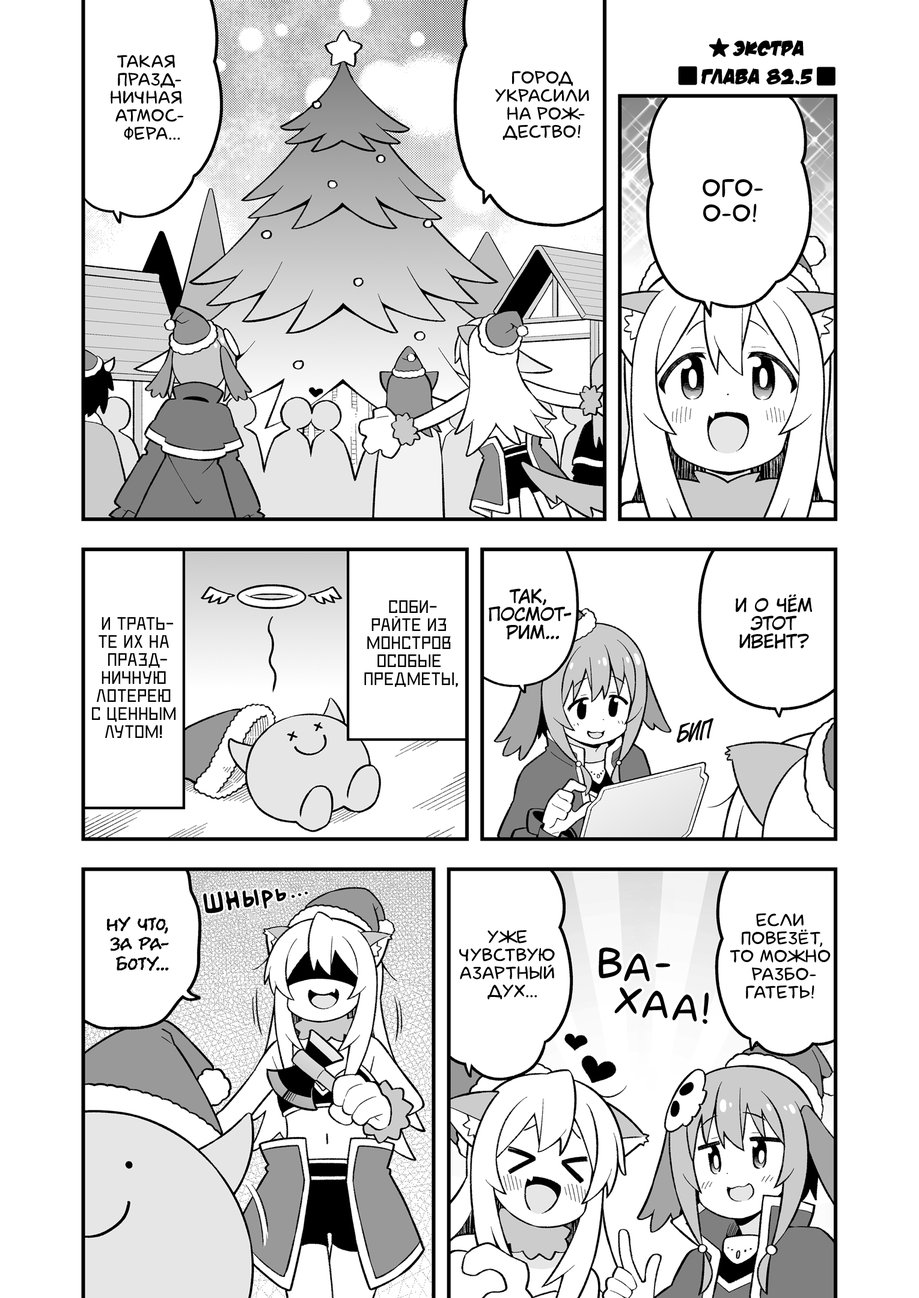
<style>
.page{position:relative;width:919px;height:1298px;background:#ffffff}
.page>*{position:absolute;margin:0}
.t1{font:21.6px "v_DamnNoisyKids";color:#000000;text-transform:uppercase}
.t2{font:18px "laCartoonerie";color:#000000;text-transform:uppercase}
.t3{font:25.2px "laCartoonerie";color:#000000;text-transform:uppercase}
.t4{font:18px "KuraiVoice2";color:#000000;text-transform:uppercase}
.t5{font:18px "DeadMetroC";color:#000000;text-transform:uppercase}
.t6{font:21.6px "v_CCDearDiary";color:#000000;text-transform:uppercase}
.t7{font:45.4px "v_BillyTheFlyingRobotBBLC";color:#000000;scale:0.71 1}
.t8{font:40.6px "v_BillyTheFlyingRobotBBLC";color:#000000;scale:0.77 1}
.t9{font:36.1px "v_BillyTheFlyingRobotBBLC";color:#000000;scale:0.83 1}
.t10{font:31.7px "v_BillyTheFlyingRobotBBLC";color:#000000;scale:0.91 1}
.t11{font:27.6px "v_BillyTheFlyingRobotBBLC";color:#000000}
.t12{font:25.2px "v_BillyTheFlyingRobotBBLC";color:#000000}
.t13{font:24px "v_BillyTheFlyingRobotBBLC";color:#000000}
.t14{font:26.4px "v_BillyTheFlyingRobotBBLC";color:#000000}
.t15{font:19.8px "el_CCEvilSchemes";color:#000000;text-transform:uppercase}
.t16{font:43.3px "laCartoonerie";color:#000000;text-transform:uppercase}
.t17{font:40.9px "laCartoonerie";color:#000000;text-transform:uppercase}
.t18{font:39.7px "laCartoonerie";color:#000000;text-transform:uppercase}
.t19{font:40.3px "laCartoonerie";color:#000000;text-transform:uppercase}
.t20{font:39.1px "laCartoonerie";color:#000000;text-transform:uppercase}
</style>
<div class="page">
<p class="t1" style="left:732px;top:40px;width:71px;height:16px">Экстра</p>
<p class="t2" style="left:111px;top:55px;width:72px;height:85px;text-align:center">Такая<br>празд-<br>ничная<br>атмос-<br>фера...</p>
<p class="t2" style="left:495px;top:71px;width:94px;height:69px;text-align:center">Город<br>украсили<br>на Рож-<br>дество!</p>
<p class="t1" style="left:701px;top:68px;width:111px;height:17px">Глава 82.5</p>
<p class="t3" style="left:702px;top:179px;width:61px;height:43px;text-align:center">Ого-<br>о-о!</p>
<p class="t4" style="left:489px;top:588px;width:82px;height:51px;text-align:center">Так,<br>посмот-<br>рим...</p>
<p class="t5" style="left:364px;top:600px;width:94px;height:87px;text-align:center">Соби-<br>райте из<br>монстров<br>особые<br>предметы,</p>
<p class="t4" style="left:735px;top:594px;width:77px;height:55px;text-align:center">И о чём<br>этот<br>ивент?</p>
<p class="t5" style="left:92px;top:617px;width:83px;height:121px;text-align:center">И трать-<br>те их на<br>празд-<br>ничную<br>лотерею<br>с ценным<br>лутом!</p>
<p class="t6" style="left:677px;top:718px;width:36px;height:25px;rotate:-8deg">бип</p>
<p class="t7" style="left:203px;top:891px;width:21px;height:22px;rotate:-8deg">ш</p>
<p class="t8" style="left:225px;top:891px;width:15px;height:19px;rotate:-8deg">н</p>
<p class="t9" style="left:242px;top:889px;width:17px;height:18px;rotate:-6deg">ы</p>
<p class="t10" style="left:261px;top:890px;width:12px;height:19px;rotate:-7deg">р</p>
<p class="t11" style="left:275px;top:889px;width:11px;height:12px;rotate:-10deg">ь</p>
<p class="t12" style="left:298px;top:893px;width:4px;height:4px">.</p>
<p class="t13" style="left:305px;top:891px;width:3px;height:4px">.</p>
<p class="t14" style="left:291px;top:895px;width:4px;height:3px">.</p>
<p class="t15" style="left:107px;top:916px;width:62px;height:55px;text-align:center">Ну что,<br>за ра-<br>боту...</p>
<p class="t2" style="left:729px;top:913px;width:101px;height:86px;text-align:center">Если<br>повезёт,<br>то можно<br>разбо-<br>гатеть!</p>
<p class="t2" style="left:459px;top:930px;width:96px;height:69px;text-align:center">Уже<br>чувствую<br>азартный<br>дух...</p>
<p class="t16" style="left:598px;top:947px;width:23px;height:31px;rotate:4deg">в</p>
<p class="t17" style="left:624px;top:954px;width:26px;height:27px;rotate:3deg">а</p>
<p class="t16" style="left:655px;top:963px;width:15px;height:4px">-</p>
<p class="t18" style="left:614px;top:987px;width:28px;height:27px;rotate:8deg">х</p>
<p class="t19" style="left:642px;top:990px;width:26px;height:28px;rotate:4deg">а</p>
<p class="t20" style="left:672px;top:994px;width:25px;height:27px;rotate:6deg">а</p>
<p class="t16" style="left:702px;top:992px;width:6px;height:32px">!</p>
</div>
